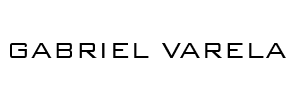
<style>
.page{position:relative;width:300px;height:100px;background:#ffffff}
.page>*{position:absolute;margin:0}
.t1{font:30px "BankGothicBT-Light";color:#000000}
</style>
<div class="page">
<p class="t1" style="left:10px;top:43px;width:276px;height:15px">GABRIEL VARELA</p>
</div>
